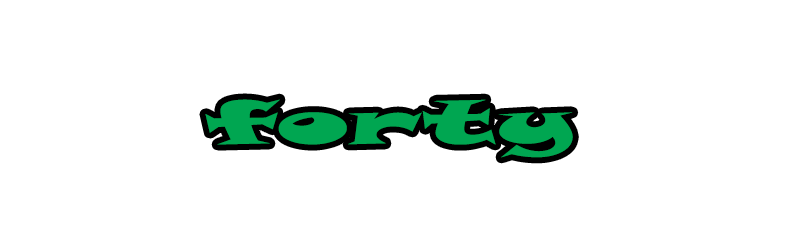
<style>
.page{position:relative;width:812px;height:249px;background:#ffffff}
.page>*{position:absolute;margin:0}
.t1{font:60px "SnapITC-Regular";color:#00a651;scale:2 1}
</style>
<div class="page">
<p class="t1" style="left:205px;top:99px;width:368px;height:59px">forty</p>
</div>
